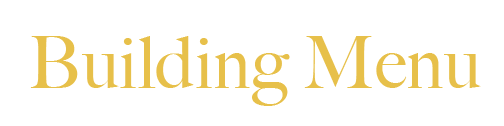
<style>
.page{position:relative;width:504px;height:126px;background:#ffffff}
.page>*{position:absolute;margin:0}
.t1{font:72px "BigCaslon-Medium";color:#e7c04a}
</style>
<div class="page">
<p class="t1" style="left:30px;top:36px;width:451px;height:70px">Building Menu</p>
</div>
